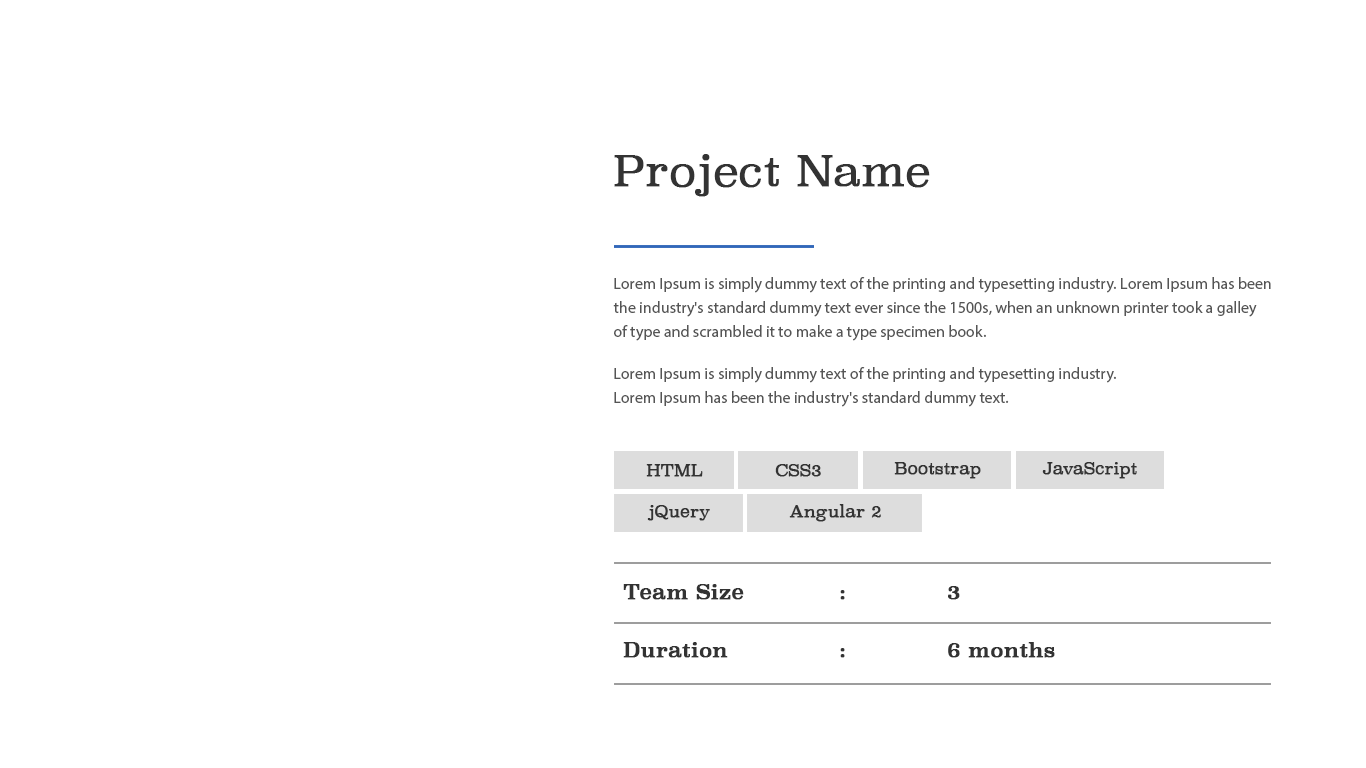
<style>
.page{position:relative;width:1366px;height:768px;background:#ffffff}
.page>*{position:absolute;margin:0}
.t1{font:42px "Superclarendon-Light";color:#333333;font-weight:bold}
.t2{font:16px/24px "MyriadPro-Regular";color:#555555}
.t3{font:16px "Superclarendon-Light";color:#333333;font-weight:bold}
.t4{font:20px "Superclarendon-Regular";color:#333333;font-weight:bold}
</style>
<div class="page">
<p class="t1" style="left:614px;top:154px;width:316px;height:43px">Project Name</p>
<p class="t2" style="left:613px;top:277px;width:658px;height:64px">Lorem Ipsum is simply dummy text of the printing and typesetting industry. Lorem Ipsum has been <br>the industry's standard dummy text ever since the 1500s, when an unknown printer took a galley <br>of type and scrambled it to make a type specimen book.</p>
<p class="t2" style="left:614px;top:367px;width:502px;height:40px">Lorem Ipsum is simply dummy text of the printing and typesetting industry. <br>Lorem Ipsum has been the industry's standard dummy text.</p>
<p class="t3" style="left:894px;top:462px;width:87px;height:17px">Bootstrap</p>
<p class="t3" style="left:1042px;top:462px;width:95px;height:17px">JavaScript</p>
<p class="t3" style="left:646px;top:464px;width:57px;height:13px">HTML</p>
<p class="t3" style="left:775px;top:464px;width:46px;height:13px">CSS3</p>
<p class="t3" style="left:647px;top:505px;width:63px;height:16px">jQuery</p>
<p class="t3" style="left:789px;top:504px;width:92px;height:18px">Angular 2</p>
<p class="t4" style="left:623px;top:584px;width:337px;height:16px">Team Size   :    3</p>
<p class="t4" style="left:623px;top:642px;width:432px;height:16px">Duration    :    6 months</p>
</div>
